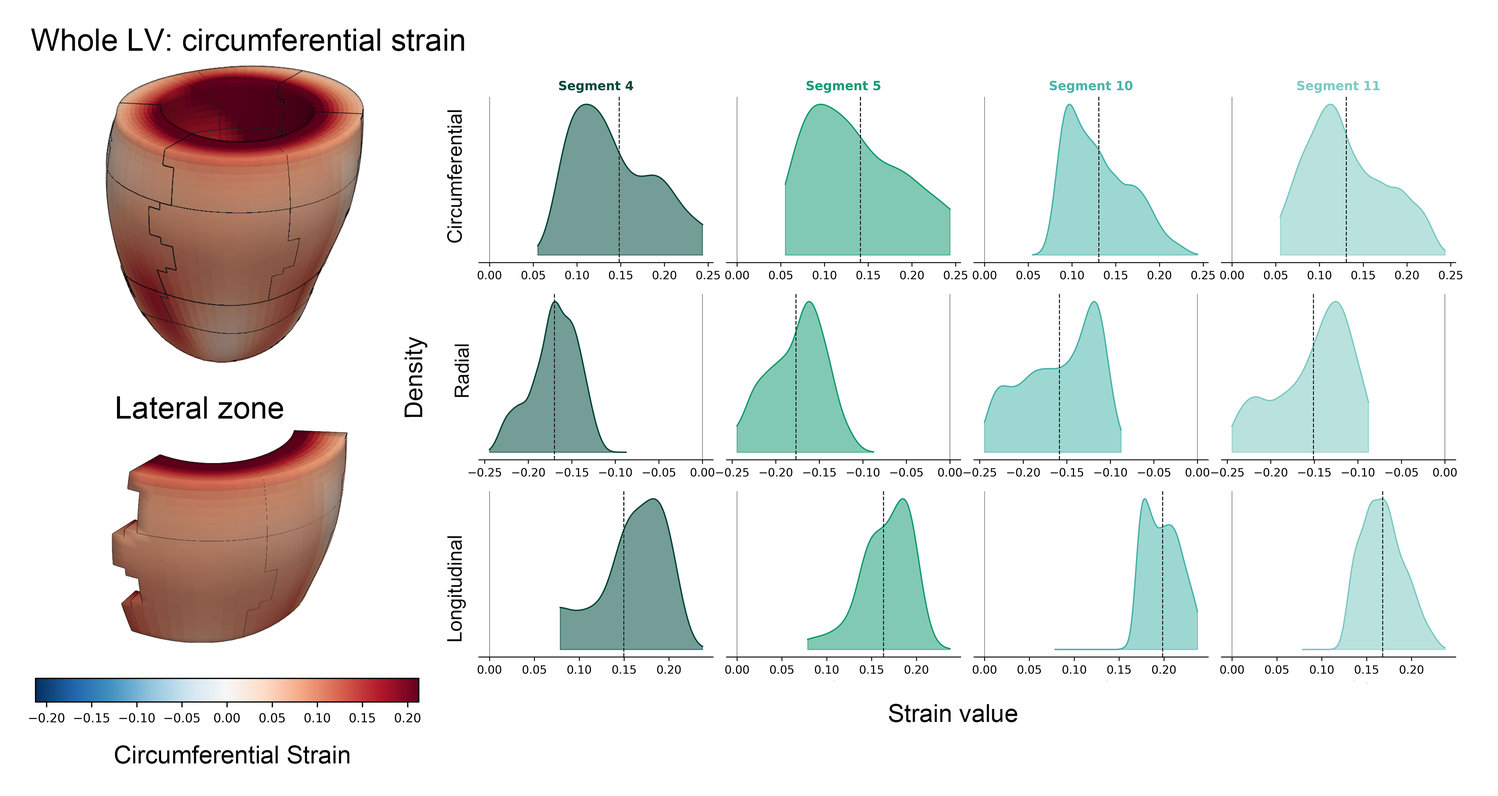
<style>
.page{position:relative;width:1498px;height:796px;background:#ffffff}
.page>*{position:absolute;margin:0}
.t1{font:30.9px "ArialMT";color:#000000}
.t2{font:20px "ArialMT";color:#000000}
.t3{font:24.7px "ArialMT";color:#000000}
.t4{font:19.6px "ArialMT";color:#000000}
</style>
<div class="page">
<p class="t1" style="left:31px;top:28px;width:433px;height:23px">Whole LV: circumferential strain</p>
<p class="t2" style="left:447px;top:110px;width:15px;height:133px;rotate:-180deg">Circumferential</p>
<p class="t3" style="left:404px;top:337px;width:24px;height:80px;rotate:180deg">Density</p>
<p class="t4" style="left:455px;top:344px;width:14px;height:53px;rotate:-180deg">Radial</p>
<p class="t1" style="left:117px;top:396px;width:166px;height:23px">Lateral zone</p>
<p class="t2" style="left:447px;top:536px;width:19px;height:105px;rotate:-180deg">Longitudinal</p>
<p class="t3" style="left:889px;top:704px;width:129px;height:18px">Strain value</p>
<p class="t3" style="left:115px;top:745px;width:235px;height:19px">Circumferential Strain</p>
</div>
